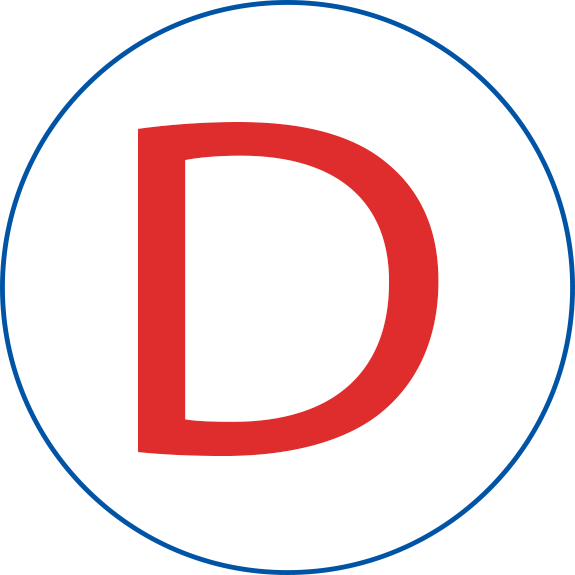
<style>
.page{position:relative;width:575px;height:575px;background:#ffffff}
.page>*{position:absolute;margin:0}
.t1{font:488px "MyriadPro-Regular";color:#df2d2d;scale:1.11 1}
</style>
<div class="page">
<p class="t1" style="left:138px;top:121px;width:301px;height:336px">D</p>
</div>
